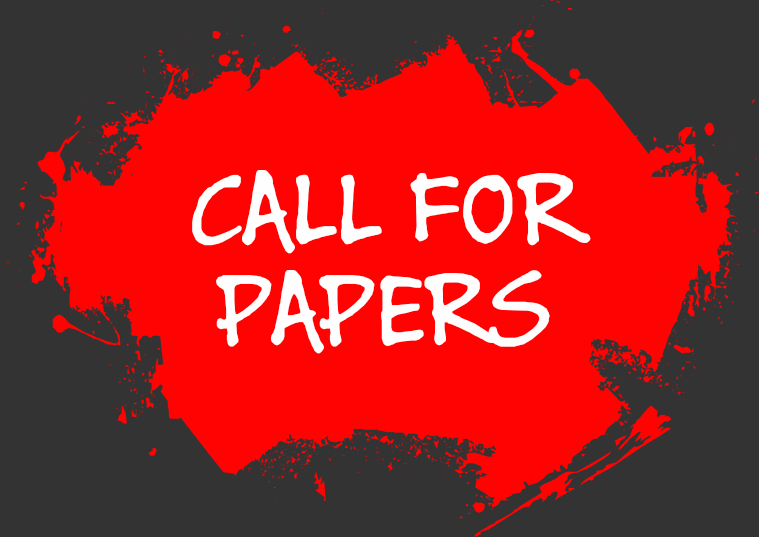
<style>
.page{position:relative;width:759px;height:537px;background:#333333}
.page>*{position:absolute;margin:0}
.t1{font:115.3px/100px "BuxtonSketch";color:#fefefe;font-variant:small-caps}
</style>
<div class="page">
<p class="t1" style="left:192px;top:170px;width:399px;height:184px;text-align:center">CALL FOR<br>PAPERS</p>
</div>
